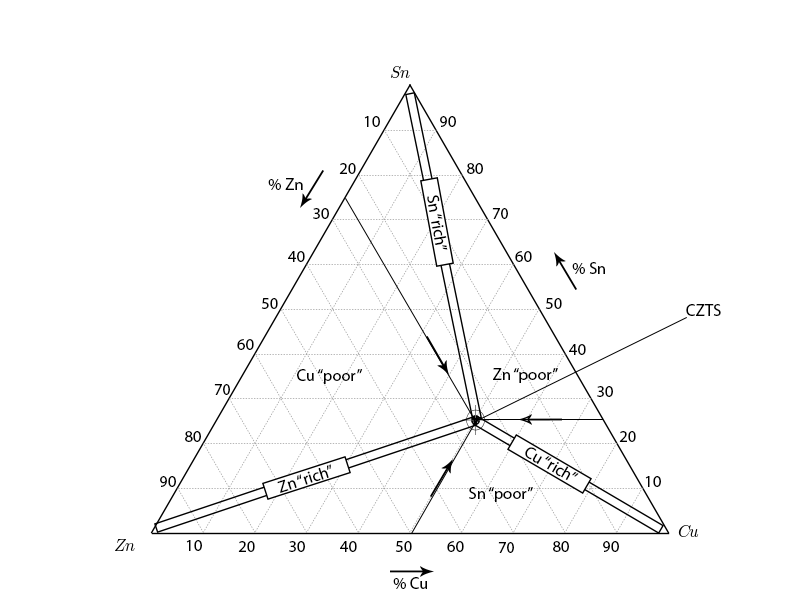
<style>
.page{position:relative;width:800px;height:600px;background:#ffffff}
.page>*{position:absolute;margin:0}
.t1{font:12px "MyriadPro-Regular";color:#000000}
</style>
<div class="page">
<p class="t1" style="left:364px;top:116px;width:16px;height:11px">10</p>
<p class="t1" style="left:440px;top:116px;width:16px;height:11px">90</p>
<p class="t1" style="left:339px;top:163px;width:17px;height:11px">20</p>
<p class="t1" style="left:467px;top:163px;width:16px;height:11px">80</p>
<p class="t1" style="left:268px;top:178px;width:35px;height:12px">% Zn</p>
<p class="t1" style="left:427px;top:195px;width:21px;height:55px;rotate:80deg">Sn “rich”</p>
<p class="t1" style="left:313px;top:208px;width:16px;height:11px">30</p>
<p class="t1" style="left:492px;top:208px;width:16px;height:11px">70</p>
<p class="t1" style="left:288px;top:251px;width:17px;height:11px">40</p>
<p class="t1" style="left:515px;top:251px;width:17px;height:11px">60</p>
<p class="t1" style="left:572px;top:262px;width:33px;height:12px">% Sn</p>
<p class="t1" style="left:261px;top:298px;width:17px;height:11px">50</p>
<p class="t1" style="left:545px;top:298px;width:17px;height:11px">50</p>
<p class="t1" style="left:686px;top:304px;width:35px;height:12px">CZTS</p>
<p class="t1" style="left:237px;top:339px;width:17px;height:11px">60</p>
<p class="t1" style="left:569px;top:344px;width:17px;height:11px">40</p>
<p class="t1" style="left:297px;top:369px;width:66px;height:15px">Cu “poor”</p>
<p class="t1" style="left:493px;top:368px;width:65px;height:15px">Zn “poor”</p>
<p class="t1" style="left:214px;top:384px;width:16px;height:11px">70</p>
<p class="t1" style="left:597px;top:386px;width:16px;height:11px">30</p>
<p class="t1" style="left:185px;top:431px;width:16px;height:11px">80</p>
<p class="t1" style="left:619px;top:431px;width:17px;height:11px">20</p>
<p class="t1" style="left:525px;top:447px;width:54px;height:33px;rotate:30deg">Cu “rich”</p>
<p class="t1" style="left:277px;top:464px;width:54px;height:29px;rotate:-18deg">Zn “rich”</p>
<p class="t1" style="left:160px;top:476px;width:16px;height:11px">90</p>
<p class="t1" style="left:645px;top:476px;width:16px;height:11px">10</p>
<p class="t1" style="left:469px;top:487px;width:64px;height:15px">Sn “poor”</p>
<p class="t1" style="left:186px;top:540px;width:16px;height:11px">10</p>
<p class="t1" style="left:238px;top:541px;width:17px;height:11px">20</p>
<p class="t1" style="left:289px;top:541px;width:16px;height:11px">30</p>
<p class="t1" style="left:340px;top:541px;width:17px;height:11px">40</p>
<p class="t1" style="left:395px;top:541px;width:17px;height:11px">50</p>
<p class="t1" style="left:447px;top:541px;width:17px;height:11px">60</p>
<p class="t1" style="left:498px;top:542px;width:16px;height:11px">70</p>
<p class="t1" style="left:553px;top:541px;width:16px;height:11px">80</p>
<p class="t1" style="left:603px;top:541px;width:16px;height:11px">90</p>
<p class="t1" style="left:393px;top:577px;width:34px;height:12px">% Cu</p>
</div>
